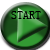
<style>
.page{position:relative;width:50px;height:50px}
.page>*{position:absolute;margin:0}
.t1{font:12px "SimSun";color:#000000}
</style>
<div class="page">
<p class="t1" style="left:11px;top:11px;width:30px;height:8px">START</p>
</div>
